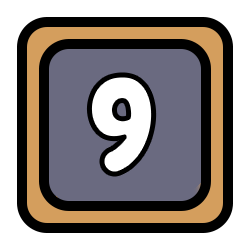
<style>
.page{position:relative;width:250px;height:250px;background:#ffffff}
.page>*{position:absolute;margin:0}
.t1{font:141.8px "SuperFresh";color:#ffffff}
</style>
<div class="page">
<p class="t1" style="left:89px;top:75px;width:65px;height:99px">9</p>
</div>
